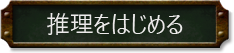
<style>
.page{position:relative;width:234px;height:53px}
.page>*{position:absolute;margin:0}
.t1{font:24px "YuGothicUI-Regular";letter-spacing:-0.025em;color:#eceaea}
</style>
<div class="page">
<p class="t1" style="left:47px;top:13px;width:136px;height:22px">推理をはじめる</p>
</div>
